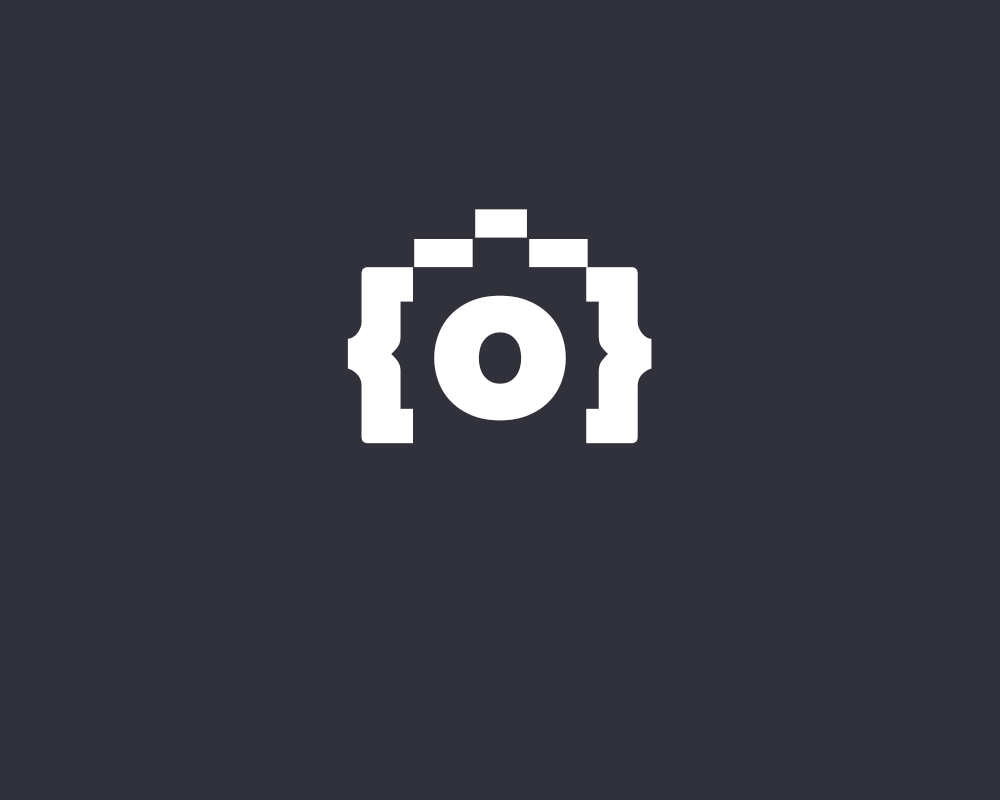
<style>
.page{position:relative;width:1000px;height:800px;background:#31313b}
.page>*{position:absolute;margin:0}
.t1{font:164.9px "Raleway-Black";letter-spacing:-0.08em;color:#ffffff}
.t2{font:227.7px "Raleway-Black";letter-spacing:0.02em;color:#ffffff}
</style>
<div class="page">
<p class="t1" style="left:414px;top:209px;width:174px;height:59px">_-_</p>
<p class="t2" style="left:347px;top:267px;width:305px;height:177px">{o}</p>
</div>
